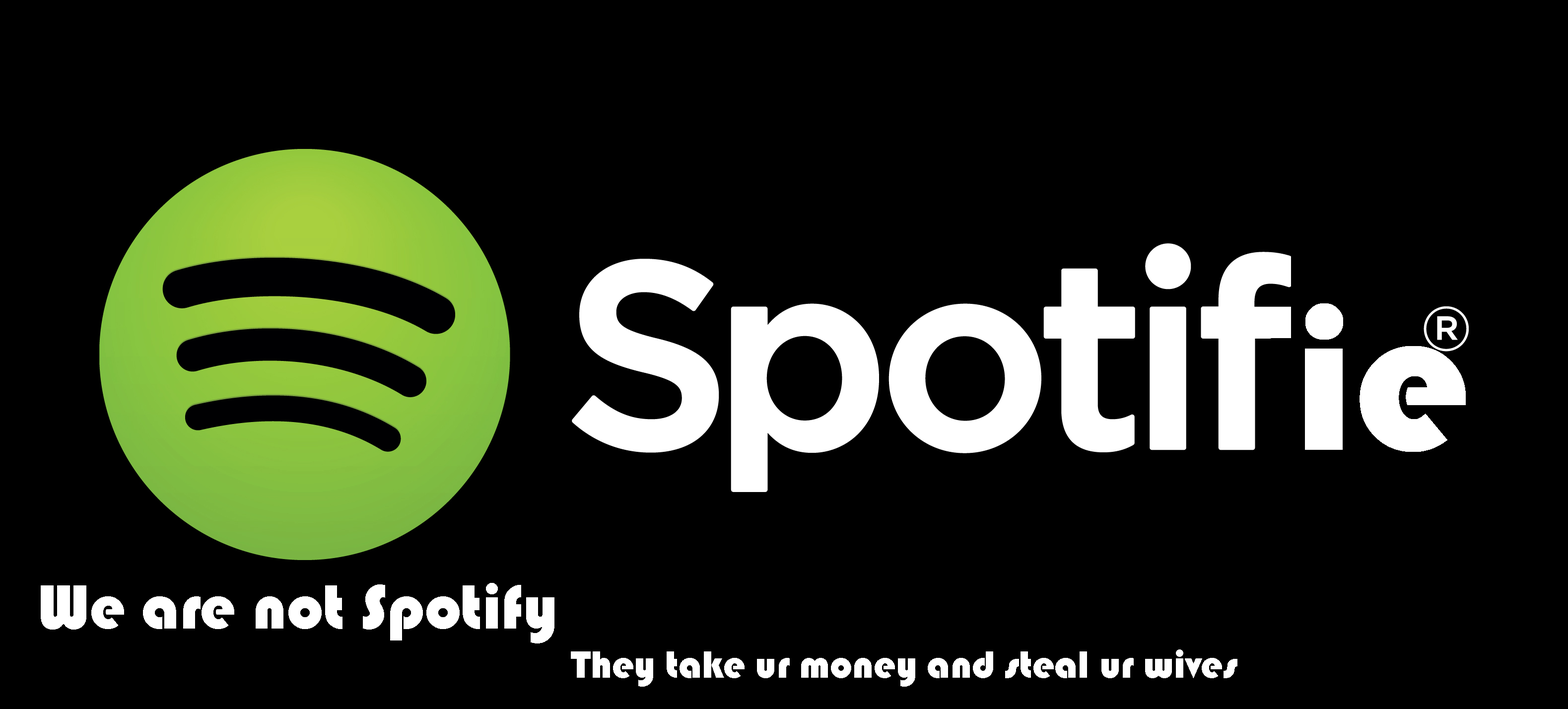
<style>
.page{position:relative;width:1568px;height:709px;background:#000000}
.page>*{position:absolute;margin:0}
.t1{font:208.5px "Bauhaus93";color:#ffffff}
.t2{font:64.5px "Bauhaus93";color:#ffffff}
.t3{font:39.7px "Bauhaus93";color:#ffffff}
</style>
<div class="page">
<p class="t1" style="left:1305px;top:303px;width:161px;height:149px">ie</p>
<p class="t2" style="left:41px;top:583px;width:513px;height:60px">We are not Spotify</p>
<p class="t3" style="left:571px;top:649px;width:666px;height:37px"><span class="t2"><br></span>They take ur money and steal ur wives</p>
</div>
